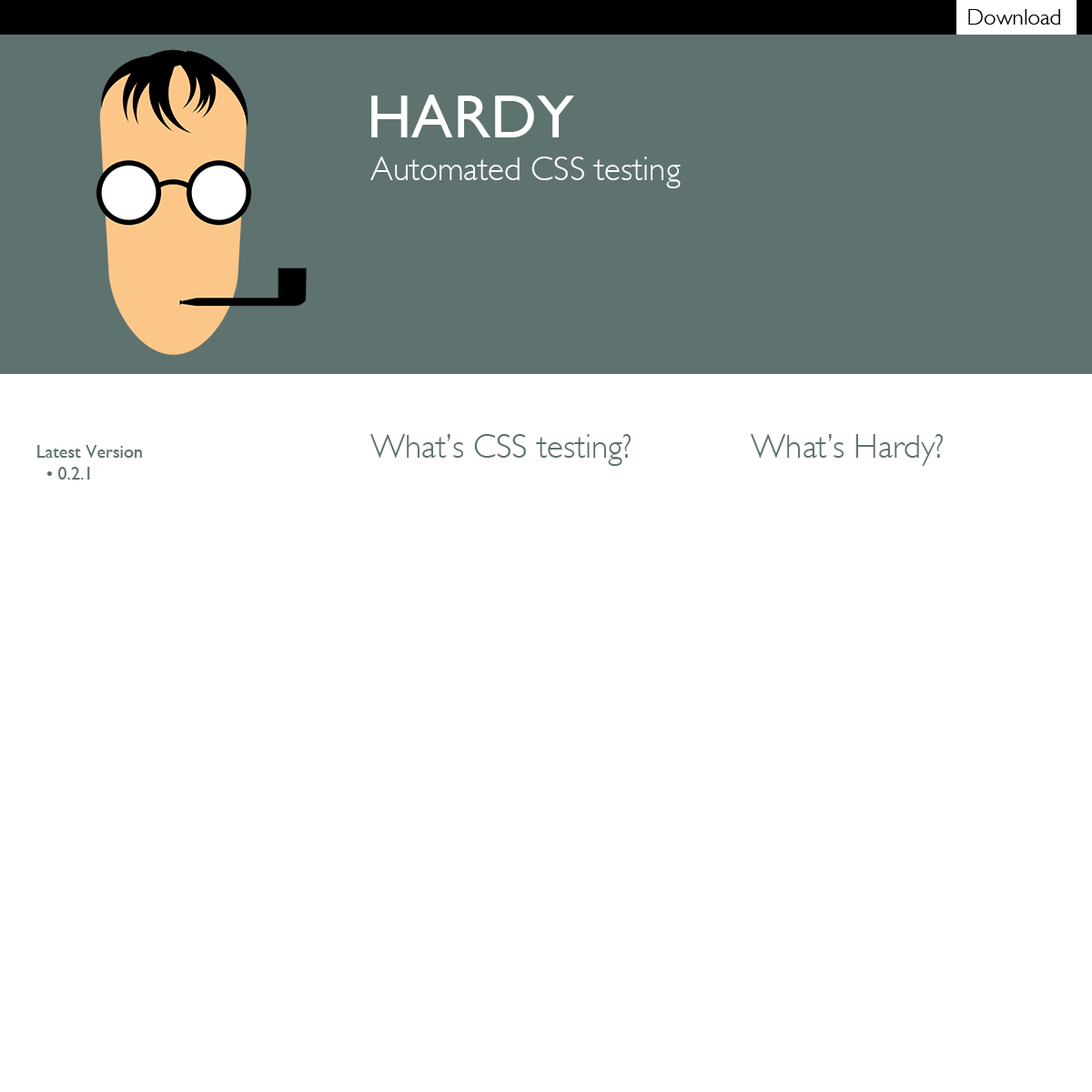
<style>
.page{position:relative;width:1092px;height:1092px;background:#ffffff}
.page>*{position:absolute;margin:0}
.t1{font:22.7px "GillSans-Light";color:#000000}
.t2{font:61.9px "GillSans";color:#ffffff;font-variant:small-caps}
.t3{font:33.7px "GillSans-Light";color:#ffffff}
.t4{font:33.7px "GillSans-Light";color:#5e7270}
.t5{font:18.2px "GillSans";color:#5e7270}
</style>
<div class="page">
<p class="t1" style="left:968px;top:9px;width:92px;height:16px">Download</p>
<p class="t2" style="left:371px;top:95px;width:203px;height:42px">HARDY</p>
<p class="t3" style="left:370px;top:157px;width:311px;height:31px">Automated CSS testing</p>
<p class="t4" style="left:370px;top:434px;width:261px;height:32px">What’s CSS testing?</p>
<p class="t4" style="left:751px;top:434px;width:192px;height:32px">What’s Hardy?</p>
<p class="t5" style="left:37px;top:445px;width:105px;height:35px">Latest Version<br>  • 0.2.1</p>
</div>
